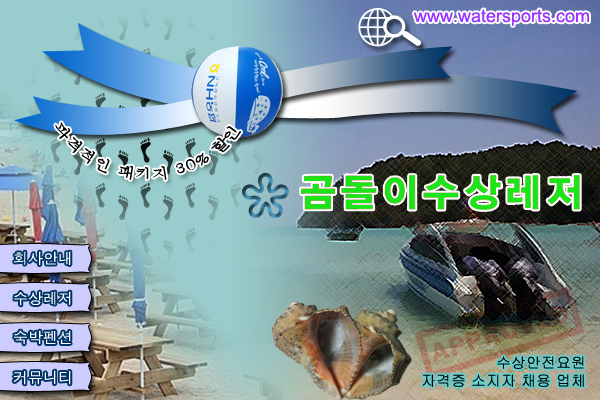
<style>
.page{position:relative;width:600px;height:400px}
.page>*{position:absolute;margin:0}
.t1{font:18px "ArialMT";color:#9933ff}
.t2{font:14px "Batang";color:#000000}
.t3{font:15px "Dotum";color:#ffffff}
.t4{font:15px "Gulim";color:#000000}
</style>
<div class="page">
<p class="t1" style="left:414px;top:9px;width:175px;height:17px">www.watersports.com</p>
<p class="t2" style="left:55px;top:122px;width:186px;height:58px;text-align:right">파격적인 패키지 30% 할인</p>
<p class="t3" style="left:14px;top:251px;width:57px;height:14px">회사안내</p>
<p class="t3" style="left:14px;top:291px;width:57px;height:15px">수상레저</p>
<p class="t3" style="left:14px;top:330px;width:57px;height:15px">숙박펜션</p>
<p class="t4" style="left:422px;top:356px;width:162px;height:31px;text-align:right">수상안전요원<br>자격증 소지자 채용 업체</p>
<p class="t3" style="left:13px;top:370px;width:58px;height:15px">커뮤니티</p>
</div>
